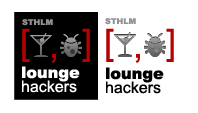
<style>
.page{position:relative;width:198px;height:113px;background:#ffffff}
.page>*{position:absolute;margin:0}
.t1{font:36px "ArialMT";color:#b80101}
.t2{font:8px "Arial-Black";color:#929292}
.t3{font:16px "Arial-Black";color:#ffffff}
.t4{font:16px "Arial-Black";color:#000000}
.t5{font:16px "ArialMT";color:#ffffff}
.t6{font:16px "ArialMT";color:#000000}
</style>
<div class="page">
<p class="t1" style="left:22px;top:28px;width:8px;height:34px">[</p>
<p class="t2" style="left:22px;top:19px;width:31px;height:7px">STHLM</p>
<p class="t1" style="left:82px;top:28px;width:8px;height:34px">]</p>
<p class="t2" style="left:105px;top:18px;width:31px;height:7px">STHLM</p>
<p class="t1" style="left:106px;top:28px;width:8px;height:34px">[</p>
<p class="t1" style="left:166px;top:28px;width:8px;height:34px">]</p>
<p class="t1" style="left:51px;top:54px;width:5px;height:9px">,</p>
<p class="t1" style="left:135px;top:54px;width:5px;height:9px">,</p>
<p class="t3" style="left:22px;top:66px;width:58px;height:16px">lounge</p>
<p class="t4" style="left:106px;top:67px;width:58px;height:16px">lounge</p>
<p class="t5" style="left:22px;top:80px;width:55px;height:13px">hackers</p>
<p class="t6" style="left:106px;top:81px;width:55px;height:13px">hackers</p>
</div>
